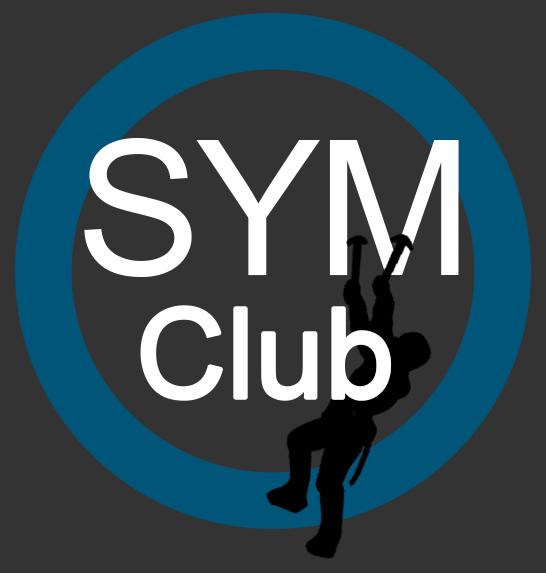
<style>
.page{position:relative;width:546px;height:573px;background:#333333}
.page>*{position:absolute;margin:0}
.t1{font:187.5px "ArialMT";letter-spacing:-0.025em;color:#ffffff}
.t2{font:125px "ArialMT";letter-spacing:-0.025em;color:#ffffff;font-weight:bold}
</style>
<div class="page">
<p class="t1" style="left:84px;top:138px;width:375px;height:139px">SYM</p>
<p class="t2" style="left:140px;top:305px;width:252px;height:96px">Club</p>
</div>
